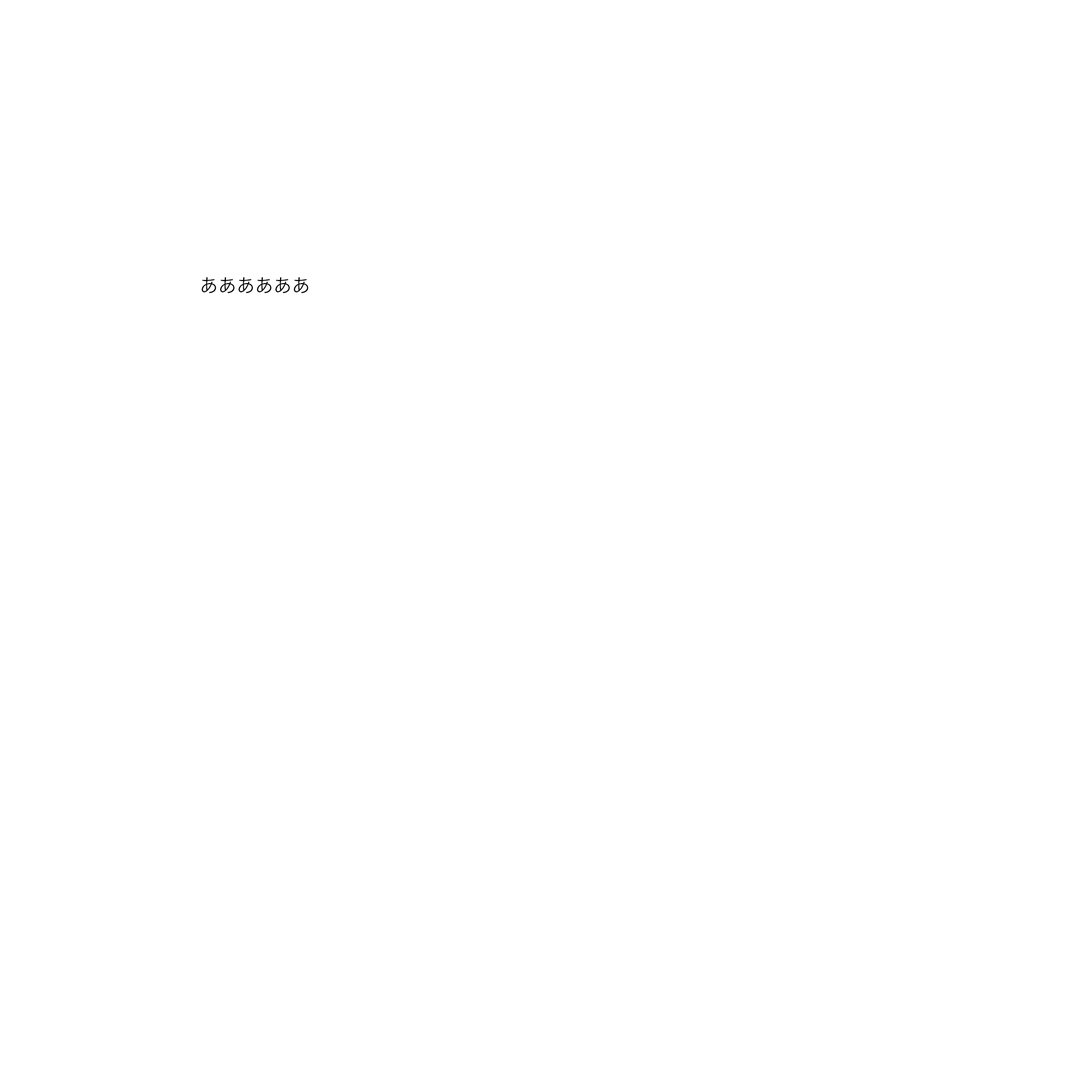
<style>
.page{position:relative;width:1092px;height:1092px;background:#ffffff}
.page>*{position:absolute;margin:0}
.t1{font:18.4px "HiraKakuProN-W3";color:#000000}
</style>
<div class="page">
<p class="t1" style="left:202px;top:277px;width:106px;height:16px">ああああああ</p>
</div>
